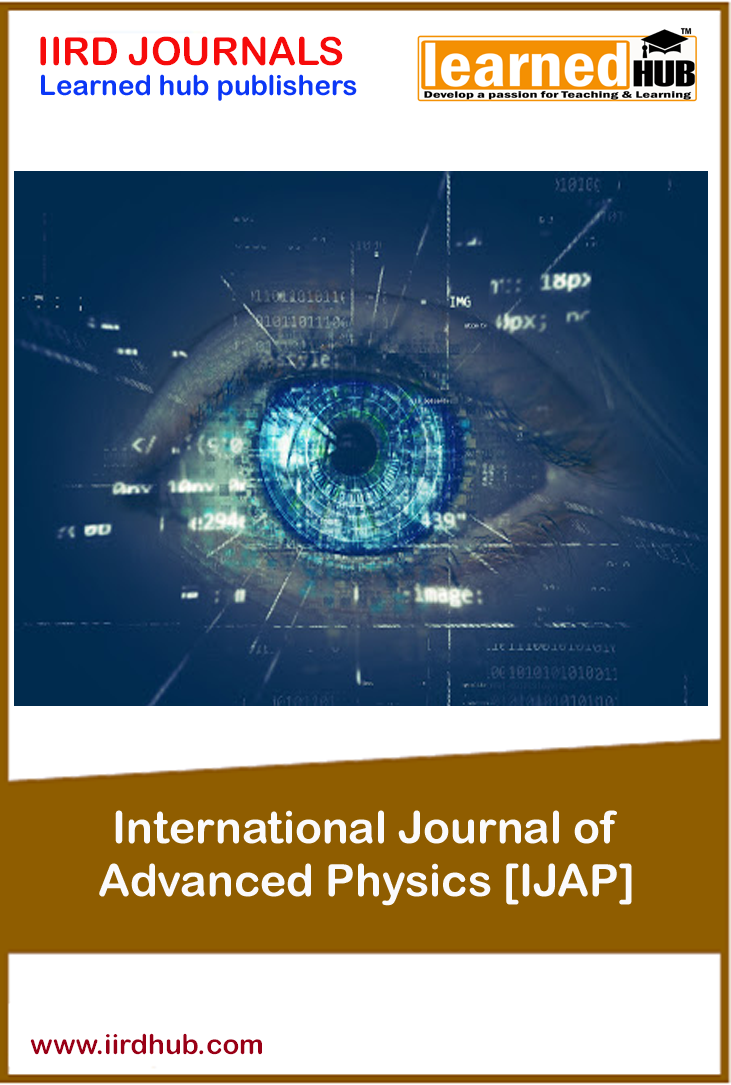
<style>
.page{position:relative;width:731px;height:1085px;background:#ffffff}
.page>*{position:absolute;margin:0}
.t1{font:38.9px "ArialRoundedMTBold";color:#f60b0b}
.t2{font:27.8px "ArialRoundedMTBold";color:#0b37f6}
.t3{font:44.4px "ArialRoundedMTBold";color:#fafafc}
.t4{font:27.8px "ArialRoundedMTBold";color:#990016}
</style>
<div class="page">
<p class="t1" style="left:40px;top:36px;width:303px;height:30px">IIRD JOURNALS</p>
<p class="t2" style="left:41px;top:74px;width:316px;height:27px">Learned hub publishers</p>
<p class="t3" style="left:99px;top:810px;width:533px;height:96px;text-align:center">International Journal of <br>Advanced Physics [IJAP]</p>
<p class="t4" style="left:30px;top:1033px;width:232px;height:22px">www.iirdhub.com</p>
</div>
